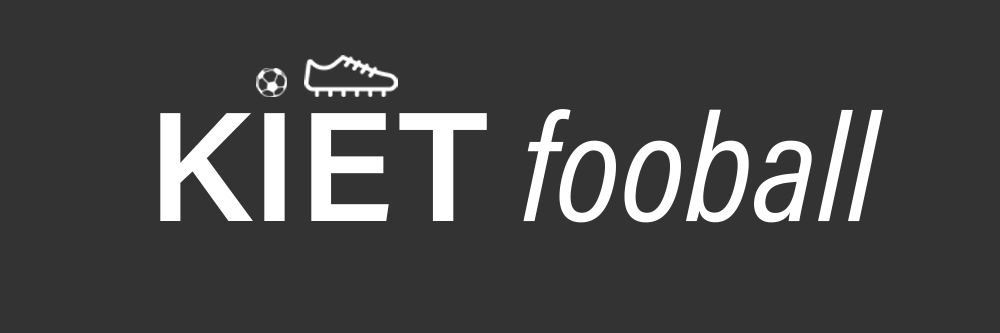
<style>
.page{position:relative;width:1000px;height:333px;background:#333333}
.page>*{position:absolute;margin:0}
.t1{font:155.9px "AcuminConcept-CondensedItalic";color:#ffffff}
.t2{font:155.9px "AcuminConcept-Semibold";color:#ffffff}
</style>
<div class="page">
<p class="t1" style="left:160px;top:109px;width:723px;height:114px"><span class="t2">KIET </span>fooball</p>
</div>
